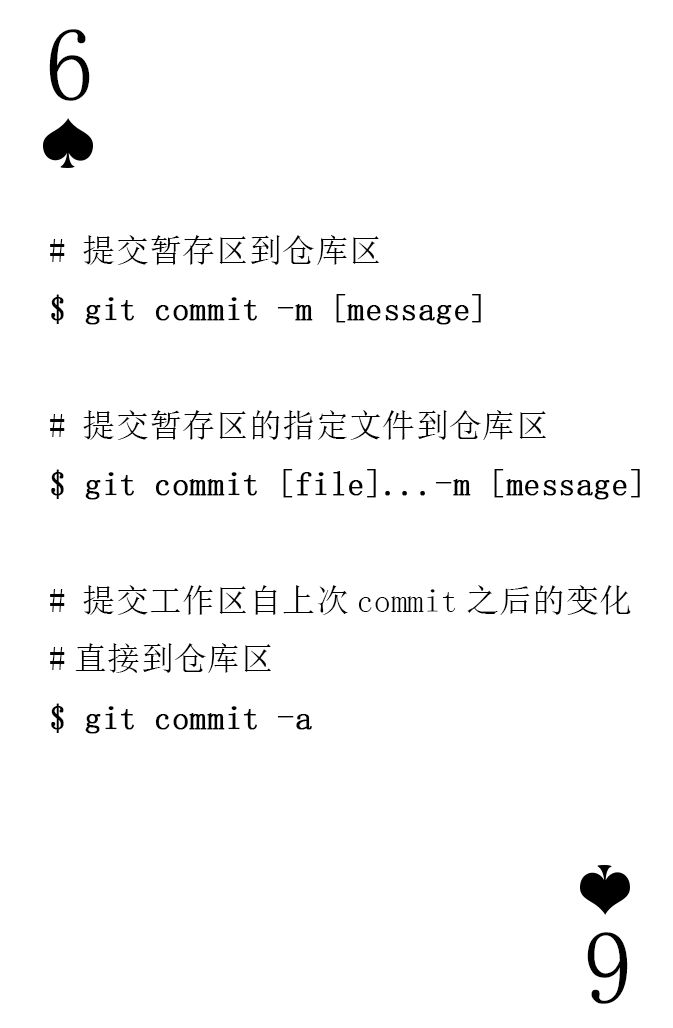
<style>
.page{position:relative;width:673px;height:1028px;background:#ffffff}
.page>*{position:absolute;margin:0}
.t1{font:104.2px "SimSun-ExtB";color:#010101;scale:0.93 1}
.t2{font:33.3px "SimSun";color:#000000;font-weight:bold}
.t3{font:33.3px "SimSun";color:#000000}
</style>
<div class="page">
<p class="t1" style="left:49px;top:29px;width:41px;height:72px">6</p>
<p class="t2" style="left:50px;top:235px;width:590px;height:499px"><span class="t3"># 提交暂存区到仓库区<br></span>$ git commit -m [message]<br><span class="t3"><br># 提交暂存区的指定文件到仓库区<br></span>$ git commit [file]...-m [message]<br><span class="t3"><br># 提交工作区自上次commit之后的变化<br>#直接到仓库区<br></span>$ git commit -a</p>
<p class="t1" style="left:587px;top:932px;width:41px;height:72px;rotate:180deg">6</p>
</div>
